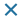
<style>
.page{position:relative;width:18px;height:18px;background:#ffffff}
.page>*{position:absolute;margin:0}
.t1{font:20px "GothicMB101Pro-Regular";letter-spacing:-0.04em;color:#23729e;font-weight:bold}
</style>
<div class="page">
<p class="t1" style="left:4px;top:3px;width:14px;height:13px">×</p>
</div>
